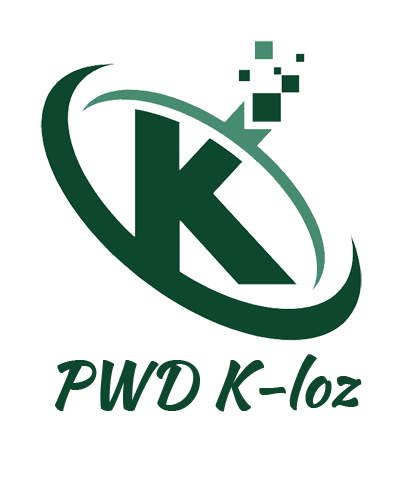
<style>
.page{position:relative;width:400px;height:497px;background:#ffffff}
.page>*{position:absolute;margin:0}
.t1{font:60.9px "KaushanScript-Regular";color:#0d472e;font-weight:bold}
</style>
<div class="page">
<p class="t1" style="left:55px;top:354px;width:307px;height:58px">PWD K-loz</p>
</div>
